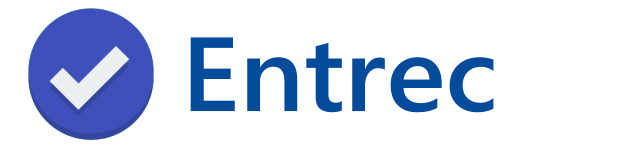
<style>
.page{position:relative;width:643px;height:150px;background:#ffffff}
.page>*{position:absolute;margin:0}
.t1{font:105px "YuGothicUI-Bold";color:#044b9b;scale:1.06 1}
</style>
<div class="page">
<p class="t1" style="left:190px;top:37px;width:304px;height:76px">Entrec</p>
</div>
